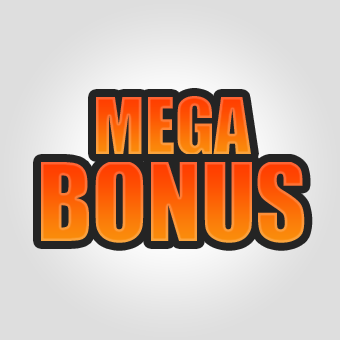
<style>
.page{position:relative;width:340px;height:340px;background:#dedede}
.page>*{position:absolute;margin:0}
.t1{font:72px "Impact"}
.t2{font:100px "Impact"}
</style>
<div class="page">
<p class="t1" style="left:2px;top:97px;width:340px;height:106px">MEGA</p>
<p class="t2" style="left:41px;top:162px;width:264px;height:81px">BONUS</p>
</div>
